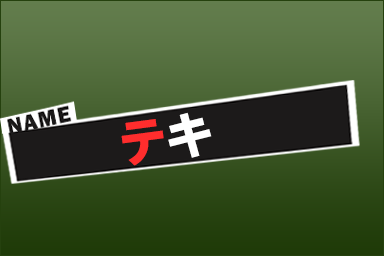
<style>
.page{position:relative;width:384px;height:256px}
.page>*{position:absolute;margin:0}
.t1{font:53.8px "HGPSoeiKakugothicUB";letter-spacing:0.05em;color:#ff2d2d}
.t2{font:53.8px "HGPSoeiKakugothicUB";letter-spacing:0.05em;color:#ffffff}
</style>
<div class="page">
<p class="t1" style="left:121px;top:112px;width:91px;height:54px;rotate:-7deg">テ<span class="t2">キ</span></p>
</div>
